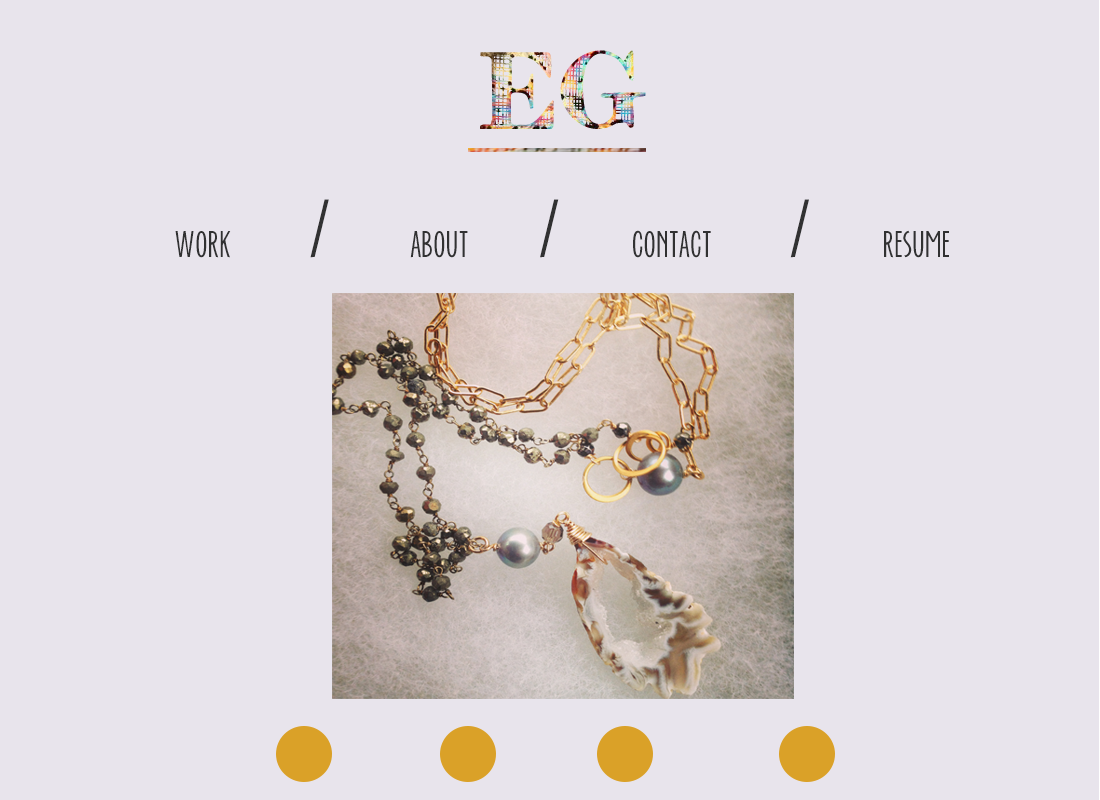
<style>
.page{position:relative;width:1100px;height:800px;background:#e8e4ec}
.page>*{position:absolute;margin:0}
.t1{font:36px "EverAfter";color:#313132}
.t2{font:72px "EverAfter";color:#313132}
</style>
<div class="page">
<p class="t1" style="left:175px;top:199px;width:774px;height:59px">work<span class="t2">     /     </span>about <span class="t2">    /    </span> contact<span class="t2">     /    </span> resume</p>
</div>
